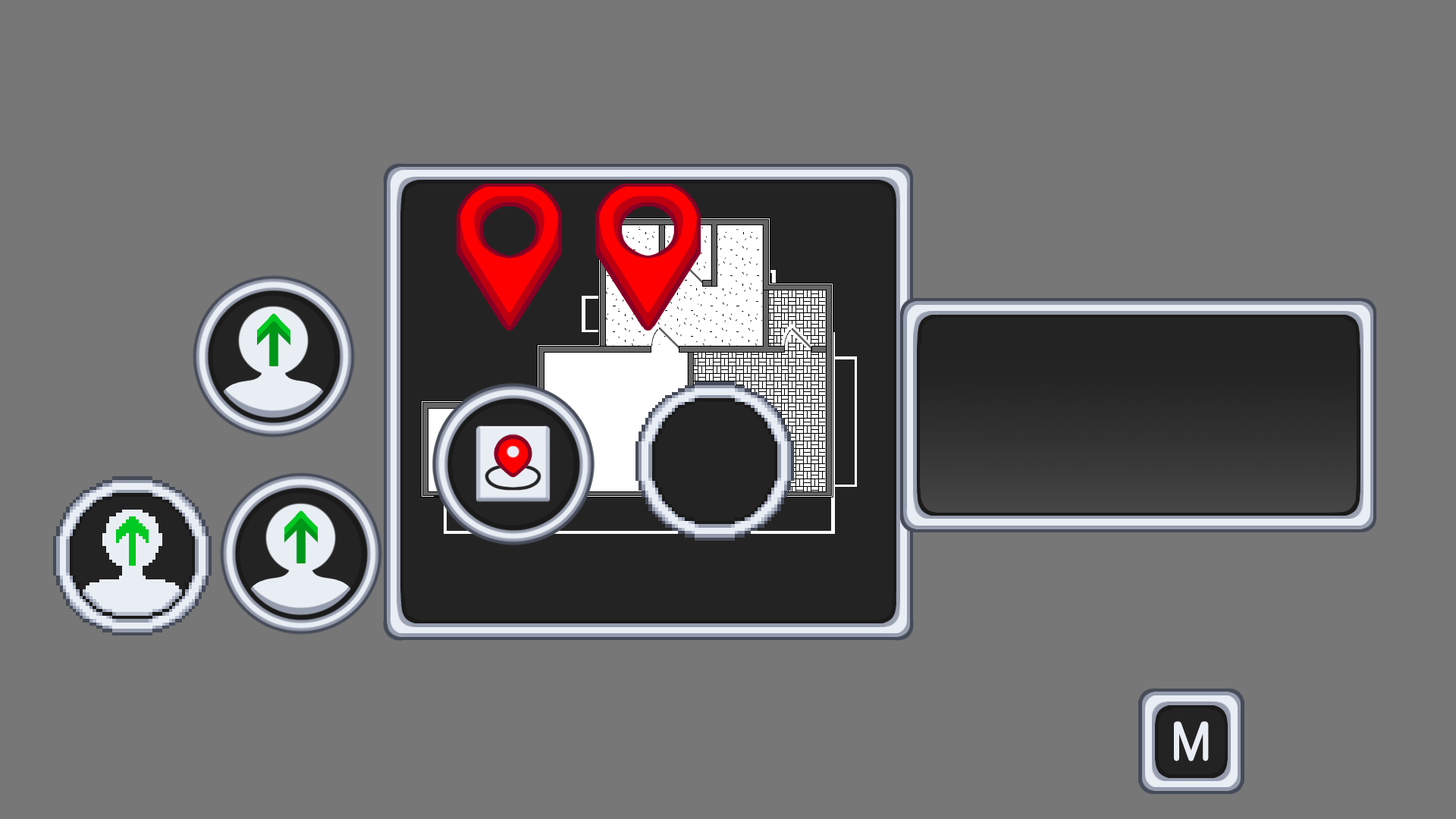
<style>
.page{position:relative;width:1456px;height:819px;background:#777777}
.page>*{position:absolute;margin:0}
.t1{font:54.6px "RoutedGothic";letter-spacing:0.02em;color:#e9eef5}
</style>
<div class="page">
<p class="t1" style="left:1174px;top:721px;width:35px;height:40px">M</p>
</div>
